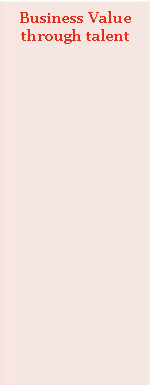
<style>
.page{position:relative;width:150px;height:385px;background:#f5e6e1}
.page>*{position:absolute;margin:0}
.t1{font:15px "Georgia-Bold";color:#e0301e}
</style>
<div class="page">
<p class="t1" style="left:20px;top:11px;width:111px;height:33px;text-align:center">Business Value through talent</p>
</div>
